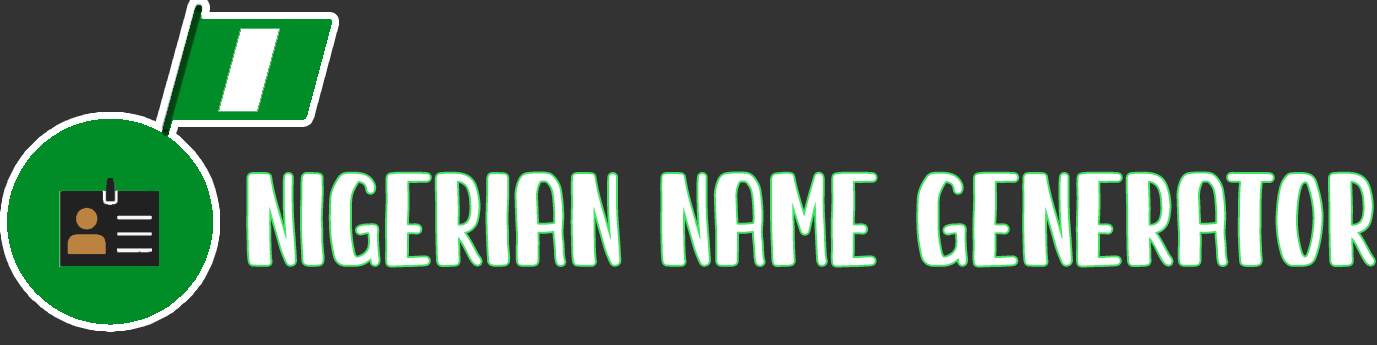
<style>
.page{position:relative;width:1377px;height:345px;background:#333333}
.page>*{position:absolute;margin:0}
.t1{font:71.8px "SundayBest";color:#fefefe}
</style>
<div class="page">
<p class="t1" style="left:248px;top:173px;width:1126px;height:93px">Nigerian Name Generator</p>
</div>
